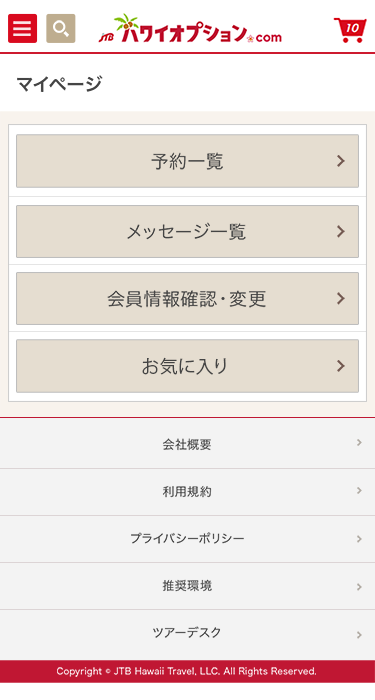
<style>
.page{position:relative;width:375px;height:700px;background:#f3f3f3}
.page>*{position:absolute;margin:0}
.t1{font:18px "HiraKakuProN-W6";letter-spacing:0.05em;color:#444444}
.t2{font:18px "HiraKakuPro-W3";letter-spacing:0.05em;color:#444444}
.t3{font:18px "KozGoPr6N-Regular";letter-spacing:0.05em;color:#444444}
.t4{font:12px/47px "HiraKakuPro-W3";letter-spacing:0.05em;color:#444444}
.t5{font:9px "HiraKakuPro-W3";letter-spacing:0.025em;color:#ffffff}
</style>
<div class="page">
<p class="t1" style="left:17px;top:75px;width:86px;height:17px">マイページ</p>
<p class="t2" style="left:151px;top:152px;width:72px;height:18px">予約一覧</p>
<p class="t2" style="left:127px;top:222px;width:119px;height:18px">メッセージ一覧</p>
<p class="t2" style="left:107px;top:290px;width:159px;height:18px">会員情報確認・変更</p>
<p class="t3" style="left:142px;top:357px;width:84px;height:18px">お気に入り</p>
<p class="t4" style="left:131px;top:438px;width:113px;height:200px;text-align:center">会社概要<br>利用規約<br>プライバシーポリシー<br>推奨環境<br>ツアーデスク</p>
<p class="t5" style="left:57px;top:667px;width:259px;height:10px">Copyright © JTB Hawaii Travel, LLC. All Rights Reserved.</p>
</div>
